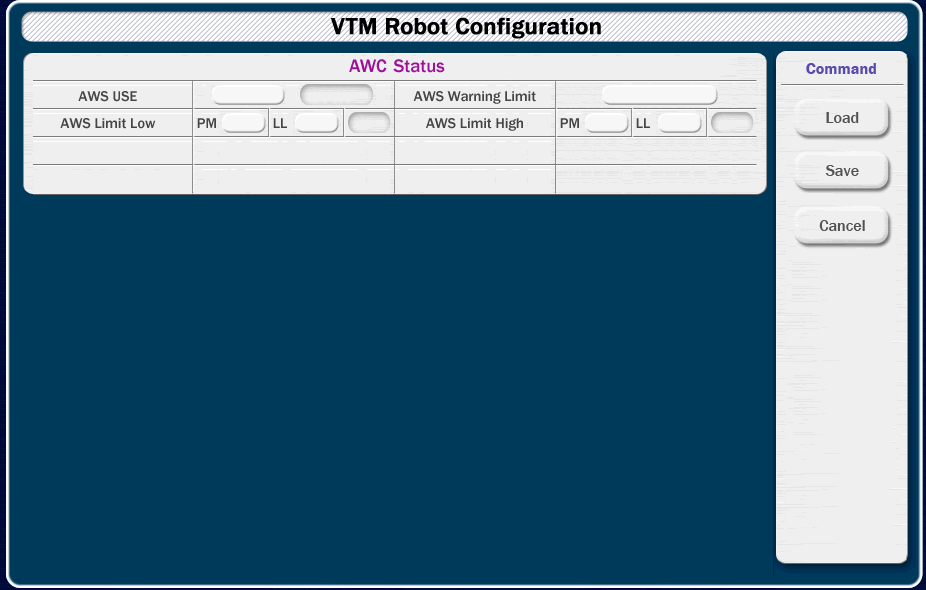
<style>
.page{position:relative;width:926px;height:590px;background:#003a5a}
.page>*{position:absolute;margin:0}
.t1{font:14.7px "FranklinGothic-Medium";color:#454545}
</style>
<div class="page">
<p class="t1" style="left:78px;top:91px;width:59px;height:11px">AWS USE</p>
<p class="t1" style="left:413px;top:91px;width:123px;height:13px">AWS Warning Limit</p>
<p class="t1" style="left:60px;top:118px;width:96px;height:11px">AWS Limit Low</p>
<p class="t1" style="left:197px;top:118px;width:19px;height:10px">PM</p>
<p class="t1" style="left:273px;top:118px;width:14px;height:10px">LL</p>
<p class="t1" style="left:426px;top:118px;width:97px;height:13px">AWS Limit High</p>
<p class="t1" style="left:560px;top:118px;width:19px;height:10px">PM</p>
<p class="t1" style="left:636px;top:118px;width:14px;height:10px">LL</p>
</div>
